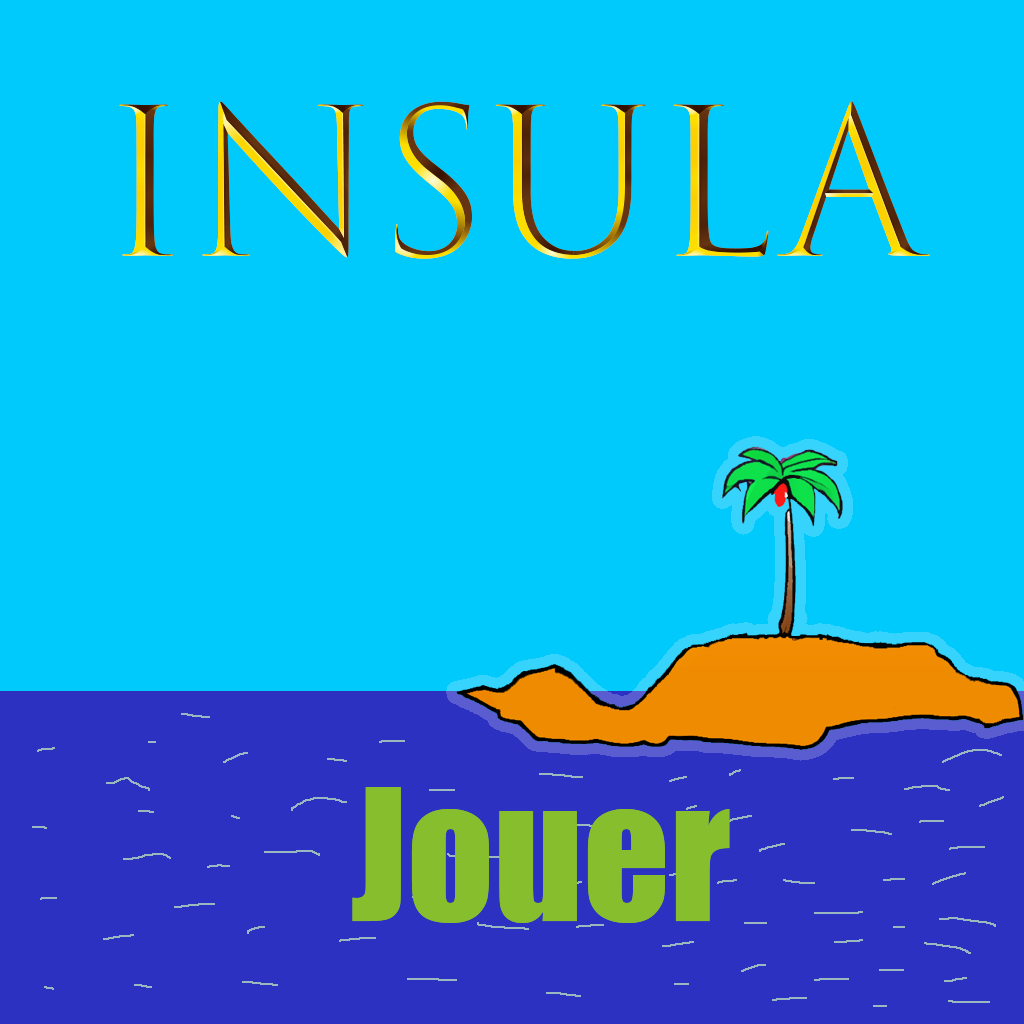
<style>
.page{position:relative;width:1024px;height:1024px;background:#00c9fb}
.page>*{position:absolute;margin:0}
.t1{font:200px "TrajanColor-Concept"}
</style>
<div class="page">
<p class="t1" style="left:119px;top:101px;width:811px;height:158px">INSULA</p>
</div>
